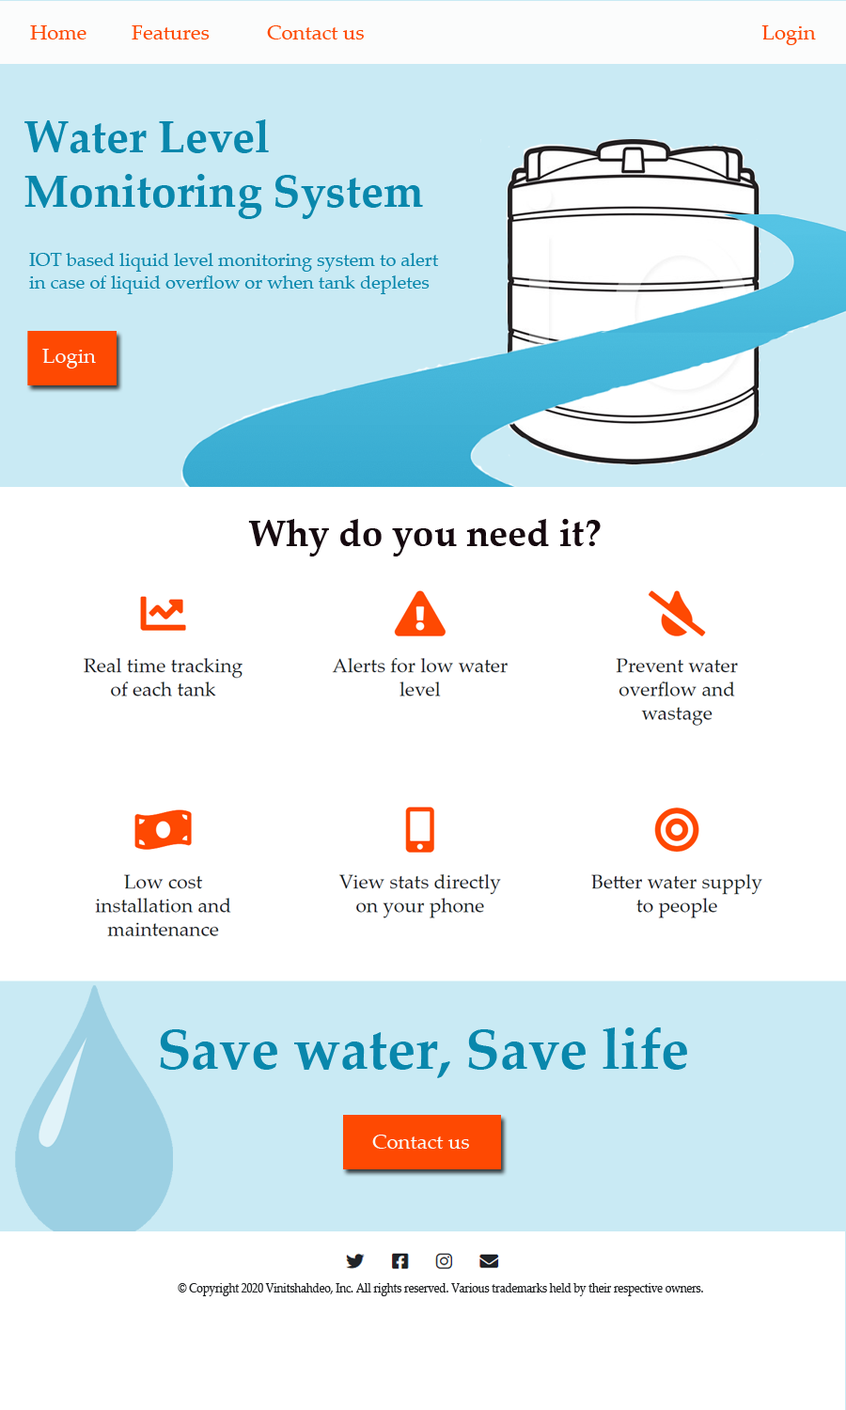
<style>
.page{position:relative;width:846px;height:1410px;background:#ffffff}
.page>*{position:absolute;margin:0}
.t1{font:20.7px "PalatinoLinotype-Roman";color:#fe4902}
.t2{font:45.1px "PalatinoLinotype-Bold";color:#0987ac}
.t3{font:18.8px "PalatinoLinotype-Roman";color:#0987ac}
.t4{font:20.7px "PalatinoLinotype-Roman";color:#f9fdfe}
.t5{font:37.6px "PalatinoLinotype-Bold";color:#16090f}
.t6{font:56.4px "PalatinoLinotype-Bold";color:#0987ac}
.t7{font:13.2px "PalatinoLinotype-Roman";color:#1f2123;scale:0.83 1}
</style>
<div class="page">
<p class="t1" style="left:30px;top:25px;width:334px;height:14px">Home  Features  Contact us</p>
<p class="t1" style="left:761px;top:25px;width:55px;height:20px">Login</p>
<p class="t2" style="left:24px;top:119px;width:399px;height:100px">Water Level <br>Monitoring System</p>
<p class="t3" style="left:29px;top:253px;width:410px;height:41px">IOT based liquid level monitoring system to alert <br>in case of liquid overflow or when tank depletes</p>
<p class="t4" style="left:42px;top:349px;width:54px;height:19px">Login</p>
<p class="t5" style="left:248px;top:519px;width:353px;height:37px">Why do you need it?</p>
<p class="t6" style="left:160px;top:1027px;width:527px;height:51px">Save water, Save life</p>
<p class="t4" style="left:372px;top:1134px;width:97px;height:14px">Contact us</p>
<p class="t7" style="left:178px;top:1283px;width:525px;height:13px">© Copyright 2020 Vinitshahdeo, Inc. All rights reserved. Various trademarks held by their respective owners.</p>
</div>
